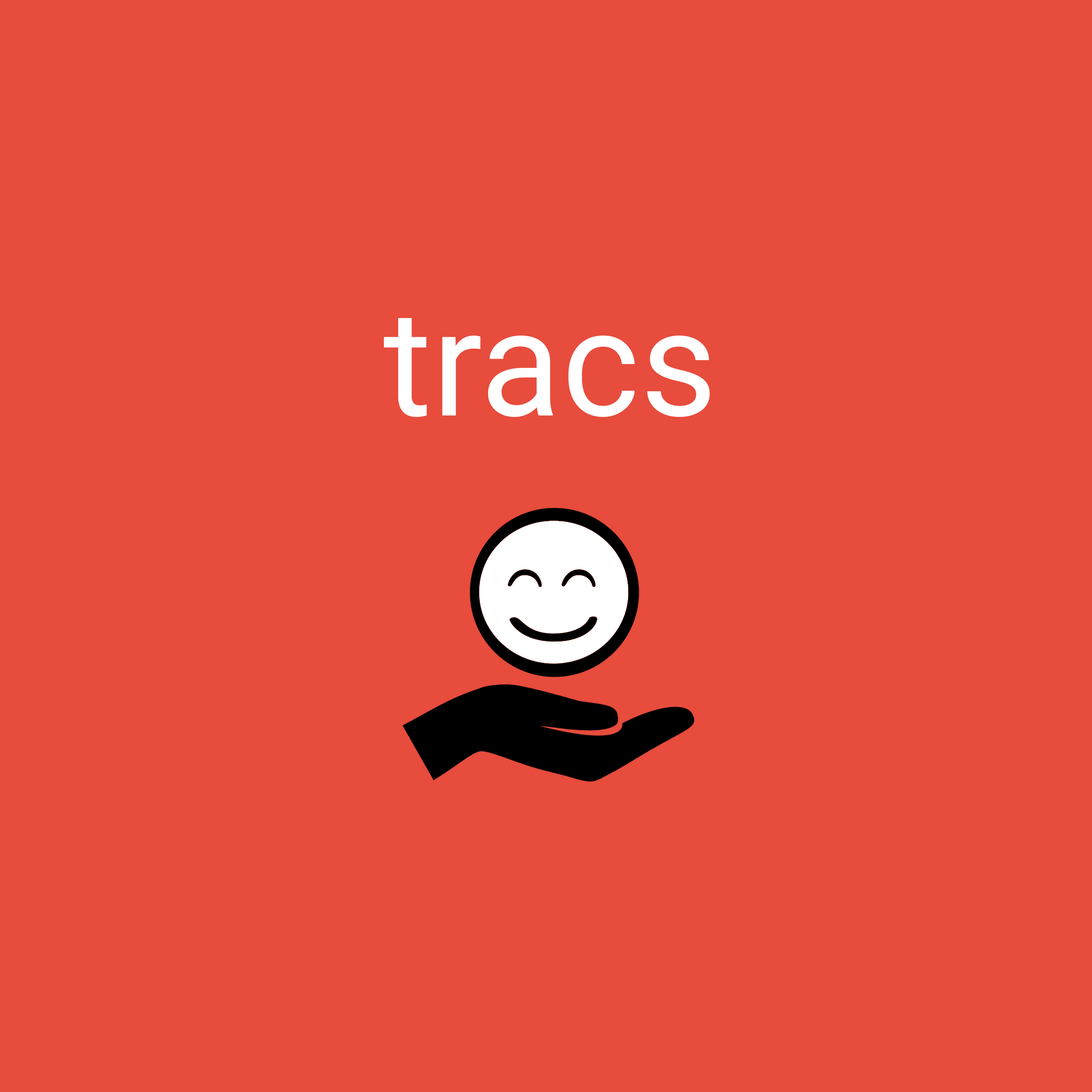
<style>
.page{position:relative;width:1092px;height:1092px;background:#e74c3c}
.page>*{position:absolute;margin:0}
.t1{font:148.4px "Roboto-Regular";letter-spacing:0.005em;color:#ffffff}
</style>
<div class="page">
<p class="t1" style="left:384px;top:318px;width:326px;height:99px">tracs</p>
</div>
